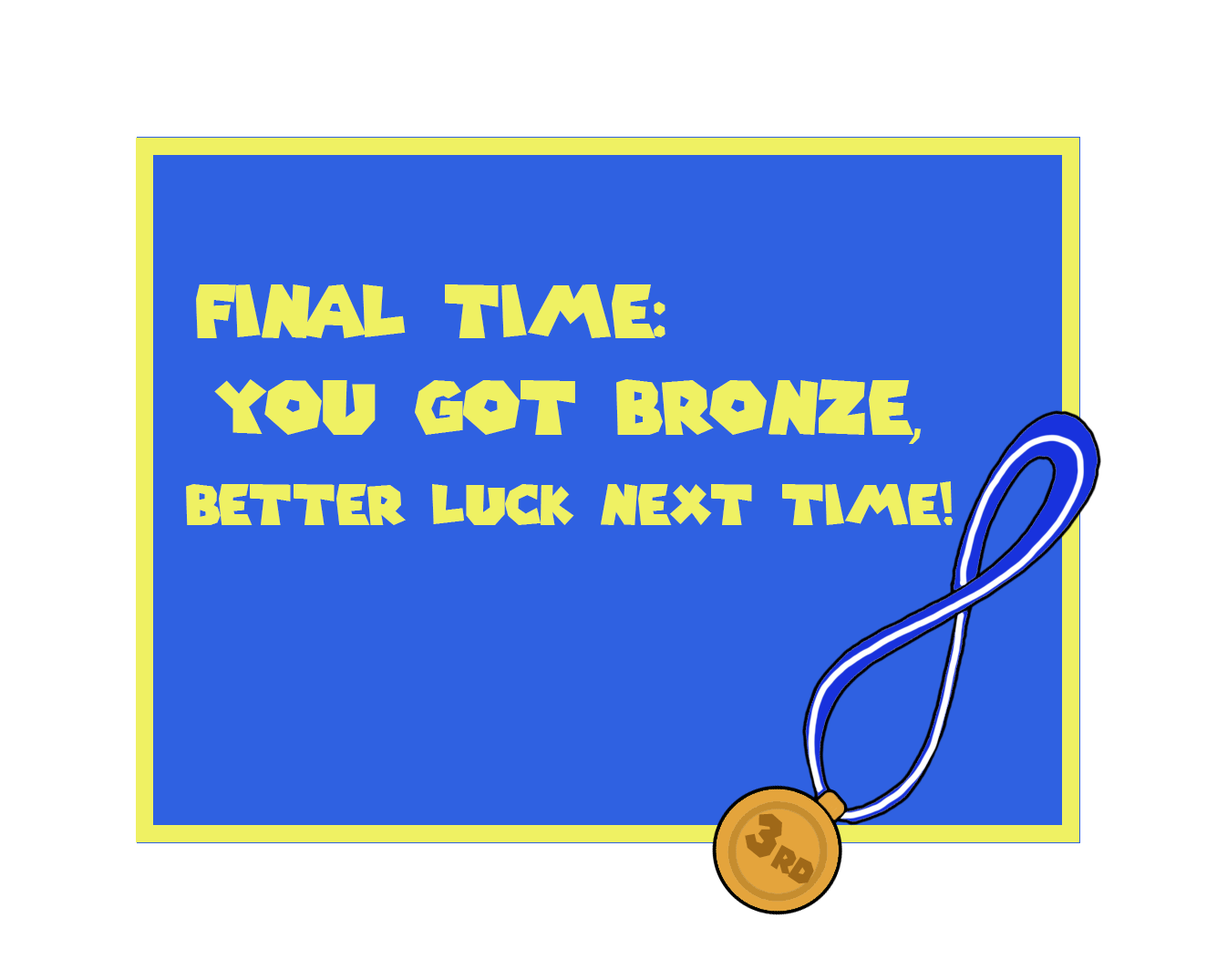
<style>
.page{position:relative;width:1217px;height:980px;background:#ffffff}
.page>*{position:absolute;margin:0}
.t1{font:72.2px "SuperMarioGalaxy";color:#eff163}
.t2{font:54.7px/90px "SuperMarioGalaxy";color:#eff163}
.t3{font:74.2px/90px "SuperMarioGalaxy";color:#eff163}
.t4{font:32.9px "SuperMarioGalaxy";color:#9f6818}
.t5{font:58.7px "SuperMarioGalaxy";color:#9f6818}
</style>
<div class="page">
<p class="t1" style="left:196px;top:284px;width:469px;height:54px">final time:</p>
<p class="t2" style="left:186px;top:379px;width:767px;height:146px;text-align:center"><span class="t3">you got bronze,<br></span>better luck next time!</p>
<p class="t4" style="left:745px;top:813px;width:69px;height:71px;rotate:34deg"><span class="t5">3</span>rd</p>
</div>
